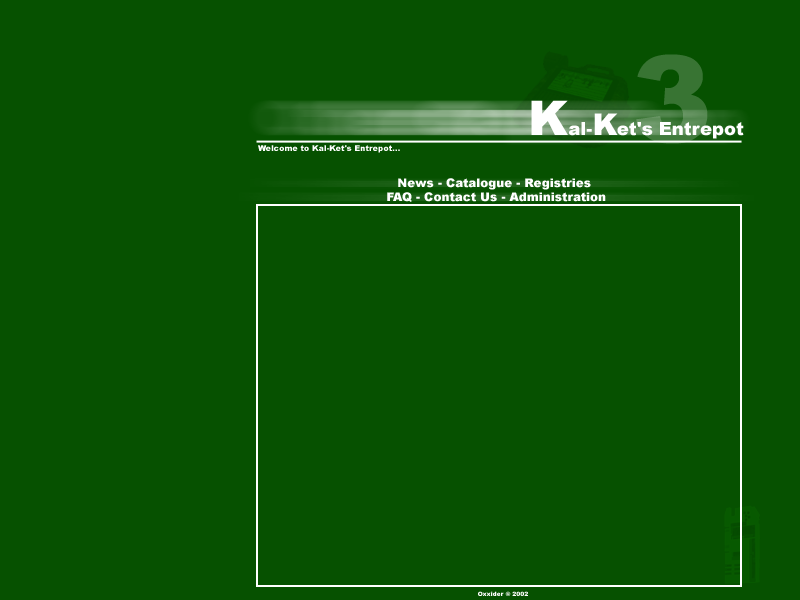
<style>
.page{position:relative;width:800px;height:600px;background:#065100}
.page>*{position:absolute;margin:0}
.t1{font:120px "Arial-Black"}
.t2{font:18px "Arial-Black";color:#ffffff}
.t3{font:48px "Arial-Black";color:#ffffff}
.t4{font:30px "Arial-Black";color:#ffffff}
.t5{font:8px "Arial-Black";color:#ffffff}
.t6{font:12px "Arial-Black";color:#ffffff}
.t7{font:6px "Arial-Black";color:#ffffff}
</style>
<div class="page">
<p class="t1" style="left:636px;top:54px;width:72px;height:90px">3</p>
<p class="t2" style="left:531px;top:100px;width:213px;height:39px"><span class="t3">K</span>al-<span class="t4">K</span>et's Entrepot</p>
<p class="t5" style="left:258px;top:145px;width:142px;height:8px">Welcome to Kal-Ket's Entrepot...</p>
<p class="t6" style="left:387px;top:178px;width:219px;height:24px;text-align:center">News - Catalogue - Registries <br> FAQ - Contact Us - Administration</p>
<p class="t7" style="left:478px;top:591px;width:50px;height:5px">Oxxider © 2002</p>
</div>
